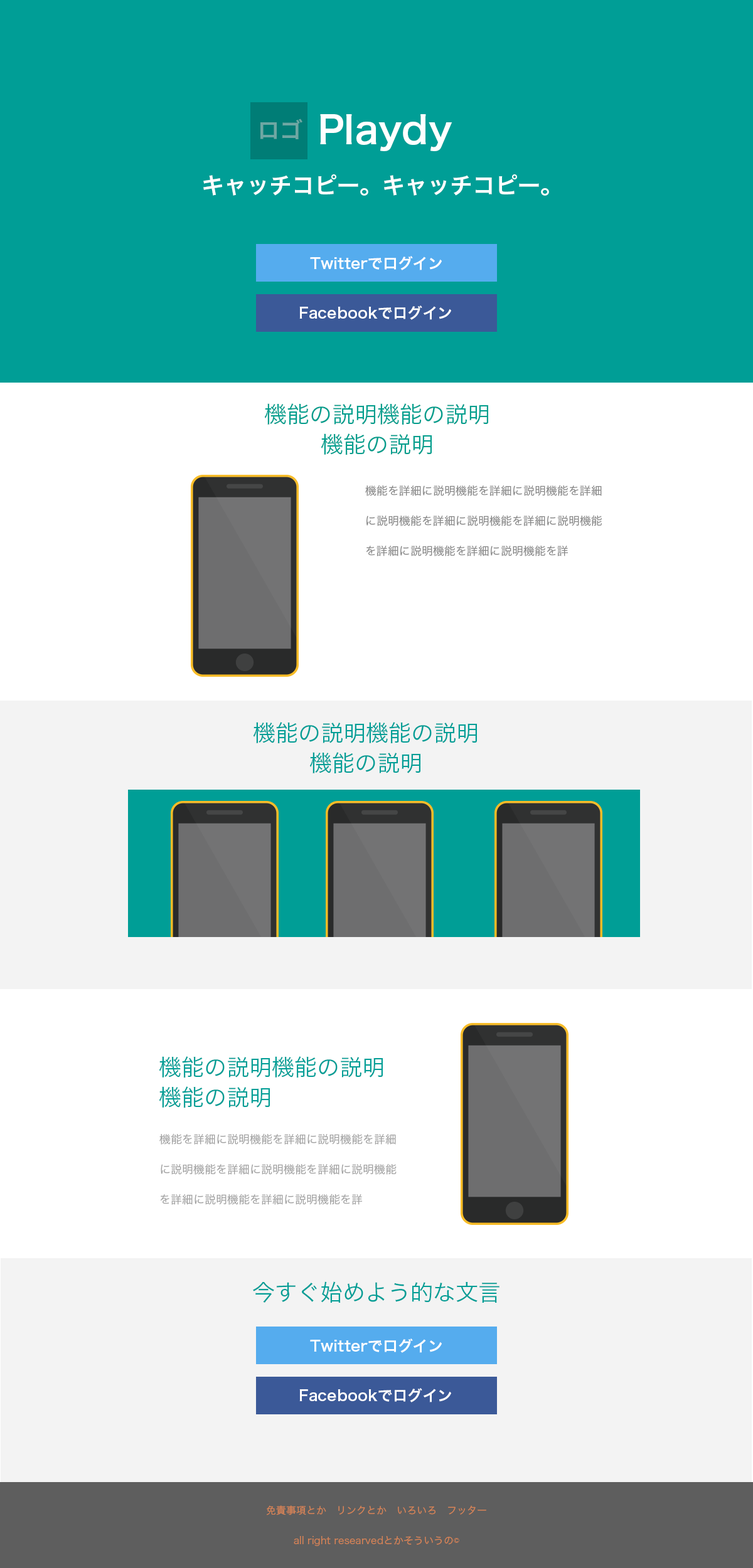
<style>
.page{position:relative;width:753px;height:1568px;background:#ffffff}
.page>*{position:absolute;margin:0}
.t1{font:22.6px "HiraKakuPro-W6";color:#6ea7a3}
.t2{font:37.6px "HiraKakuPro-W6";color:#ffffff}
.t3{font:22.6px "HiraKakuPro-W6";color:#ffffff}
.t4{font:15.1px "HiraKakuPro-W6";color:#ffffff}
.t5{font:22.6px/30.1px "HiraKakuPro-W3";color:#009e8d}
.t6{font:11.3px/30.1px "HiraKakuPro-W3";color:#878787}
.t7{font:22.6px/30.1px "HiraKakuPro-W3";color:#009e96}
.t8{font:11.3px/30.1px "HiraKakuPro-W3";color:#a2a2a2}
.t9{font:22.6px "HiraKakuPro-W3";color:#009e96}
.t10{font:10px/30.1px "HiraKakuPro-W3";color:#d68356}
</style>
<div class="page">
<p class="t1" style="left:260px;top:119px;width:42px;height:20px">ロゴ</p>
<p class="t2" style="left:320px;top:114px;width:132px;height:37px">Playdy</p>
<p class="t3" style="left:203px;top:174px;width:346px;height:22px">キャッチコピー。キャッチコピー。</p>
<p class="t4" style="left:310px;top:256px;width:132px;height:14px">Twitterでログイン</p>
<p class="t4" style="left:299px;top:305px;width:152px;height:15px">Facebookでログイン</p>
<p class="t5" style="left:264px;top:403px;width:225px;height:52px;text-align:center">機能の説明機能の説明<br>機能の説明</p>
<p class="t6" style="left:365px;top:485px;width:236px;height:71px">機能を詳細に説明機能を詳細に説明機能を詳細に説明機能を詳細に説明機能を詳細に説明機能を詳細に説明機能を詳細に説明機能を詳</p>
<p class="t7" style="left:253px;top:722px;width:224px;height:51px;text-align:center">機能の説明機能の説明<br>機能の説明</p>
<p class="t7" style="left:159px;top:1056px;width:224px;height:52px">機能の説明機能の説明<br>機能の説明</p>
<p class="t8" style="left:159px;top:1133px;width:237px;height:72px">機能を詳細に説明機能を詳細に説明機能を詳細に説明機能を詳細に説明機能を詳細に説明機能を詳細に説明機能を詳細に説明機能を詳</p>
<p class="t9" style="left:253px;top:1281px;width:246px;height:22px">今すぐ始めよう的な文言</p>
<p class="t4" style="left:310px;top:1338px;width:132px;height:15px">Twitterでログイン</p>
<p class="t4" style="left:299px;top:1388px;width:152px;height:14px">Facebookでログイン</p>
<p class="t10" style="left:267px;top:1505px;width:219px;height:41px;text-align:center">免責事項とか　リンクとか　いろいろ　フッター<br>all right researvedとかそういうの©</p>
</div>
